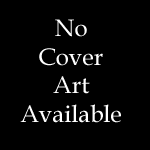
<style>
.page{position:relative;width:150px;height:150px;background:#000000}
.page>*{position:absolute;margin:0}
.t1{font:23.9px "BookAntiqua";color:#ffffff}
</style>
<div class="page">
<p class="t1" style="left:20px;top:19px;width:101px;height:104px;text-align:center">No<br>Cover<br>Art<br>Available</p>
</div>
